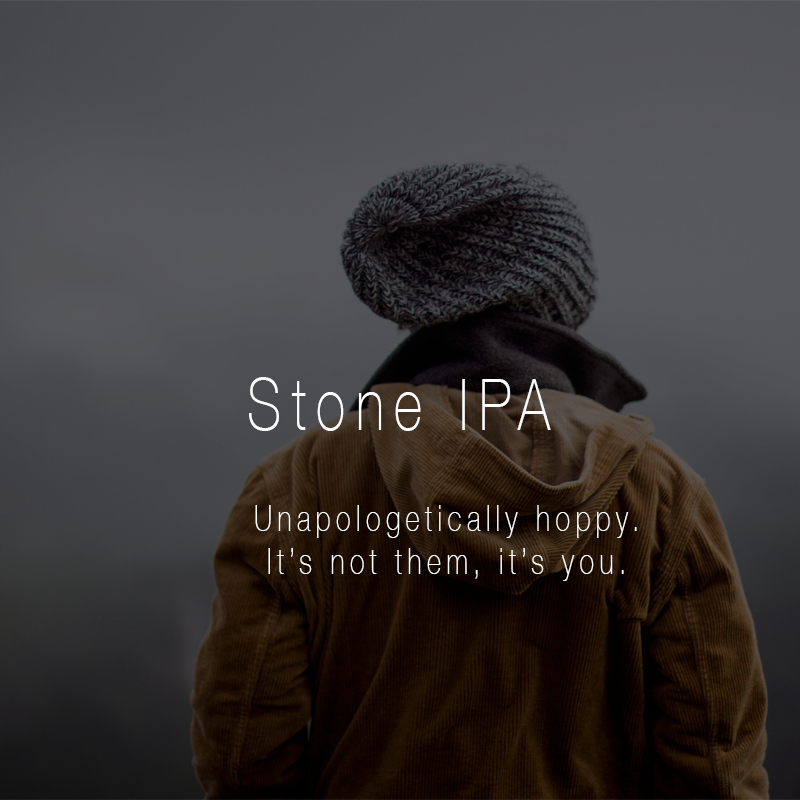
<style>
.page{position:relative;width:800px;height:800px}
.page>*{position:absolute;margin:0}
.t1{font:72px "HelveticaNeue-Thin";letter-spacing:0.2em;color:#ffffff;scale:0.75 1}
.t2{font:36px "HelveticaNeue-Thin";letter-spacing:0.2em;color:#ffffff;scale:0.75 1}
</style>
<div class="page">
<p class="t1" style="left:249px;top:377px;width:302px;height:54px">Stone IPA</p>
<p class="t2" style="left:255px;top:505px;width:382px;height:76px;text-align:center">Unapologetically hoppy.<br>It’s not them, it’s you.</p>
</div>
